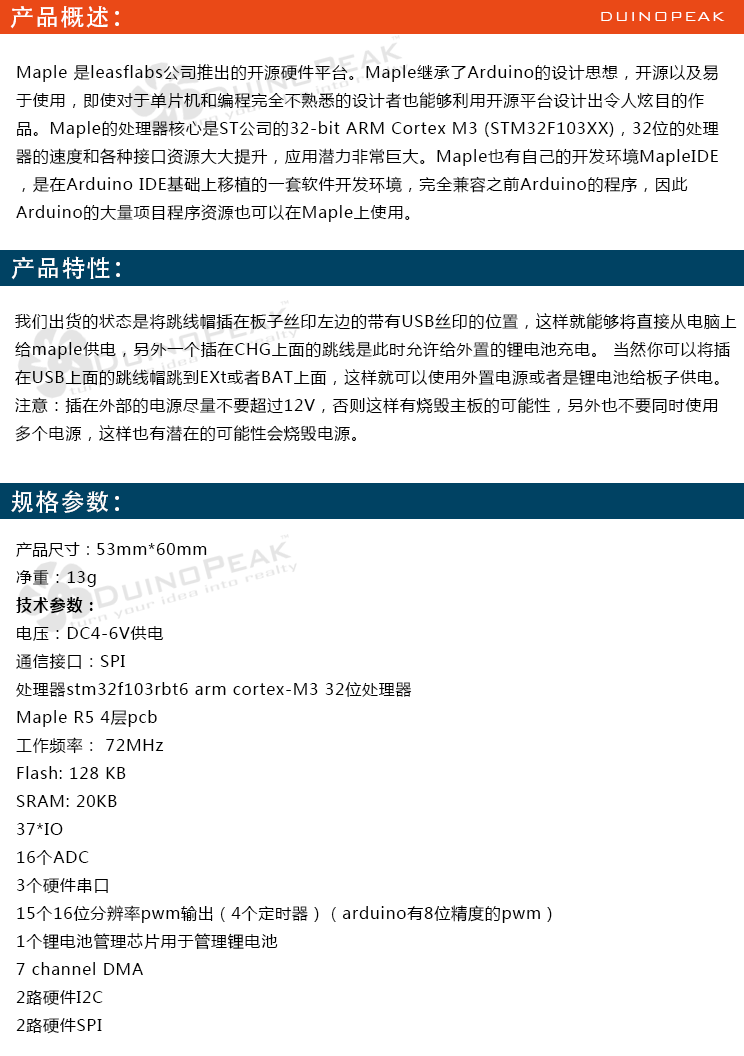
<style>
.page{position:relative;width:744px;height:1056px;background:#ffffff}
.page>*{position:absolute;margin:0}
.t1{font:24px "AdobeHeitiStd-Regular";letter-spacing:0.05em;color:#ffffff}
.t2{font:18px "BankGothicBT-Light";letter-spacing:0.05em;color:#ffffff}
.t3{font:16px "MicrosoftYaHei";letter-spacing:0.05em;color:#000000}
.t4{font:16px "MicrosoftYaHei";color:#000000}
.t5{font:16px "MicrosoftYaHei-Bold";letter-spacing:0.05em;color:#000000}
</style>
<div class="page">
<p class="t1" style="left:10px;top:6px;width:109px;height:23px">产品概述：</p>
<p class="t2" style="left:601px;top:12px;width:124px;height:9px">DUINOPEAK</p>
<p class="t3" style="left:16px;top:64px;width:703px;height:158px">Maple 是leasflabs公司推出的开源硬件平台。Maple继承了Arduino的设计思想，开源以及易<br>于使用，即使对于单片机和编程完全不熟悉的设计者也能够利用开源平台设计出令人炫目的作<br>品。Maple的处理器核心是ST公司的32-bit ARM Cortex M3 (STM32F103XX)，32位的处理<br>器的速度和各种接口资源大大提升，应用潜力非常巨大。Maple也有自己的开发环境MapleIDE<br>，是在Arduino IDE基础上移植的一套软件开发环境，完全兼容之前Arduino的程序，因此<br>Arduino的大量项目程序资源也可以在Maple上使用。</p>
<p class="t1" style="left:11px;top:256px;width:109px;height:24px">产品特性：</p>
<p class="t3" style="left:15px;top:313px;width:722px;height:129px">我们出货的状态是将跳线帽插在板子丝印左边的带有USB丝印的位置，这样就能够将直接从电脑上<br>给maple供电，另外一个插在CHG上面的跳线是此时允许给外置的锂电池充电。 当然你可以将插<br>在USB上面的跳线帽跳到EXt或者BAT上面，这样就可以使用外置电源或者是锂电池给板子供电。 <br>注意：插在外部的电源尽量不要超过12V，否则这样有烧毁主板的可能性，另外也不要同时使用<br>多个电源，这样也有潜在的可能性会烧毁电源。</p>
<p class="t1" style="left:11px;top:490px;width:108px;height:23px">规格参数：</p>
<p class="t3" style="left:16px;top:542px;width:536px;height:492px"><span class="t4">产品尺寸：</span>53mm*60mm<br>净重：13g<br><span class="t5">技术参数：<br></span>电压：DC4-6V供电<br>通信接口：SPI<br>处理器stm32f103rbt6 arm cortex-M3 32位处理器<br>Maple R5 4层pcb<br>工作频率： 72MHz<br>Flash: 128 KB<br>SRAM: 20KB<br>37*IO<br>16个ADC<br>3个硬件串口<br>15个16位分辨率pwm输出（4个定时器）（arduino有8位精度的pwm）<br>1个锂电池管理芯片用于管理锂电池<br>7 channel DMA<br>2路硬件I2C<br>2路硬件SPI</p>
</div>
